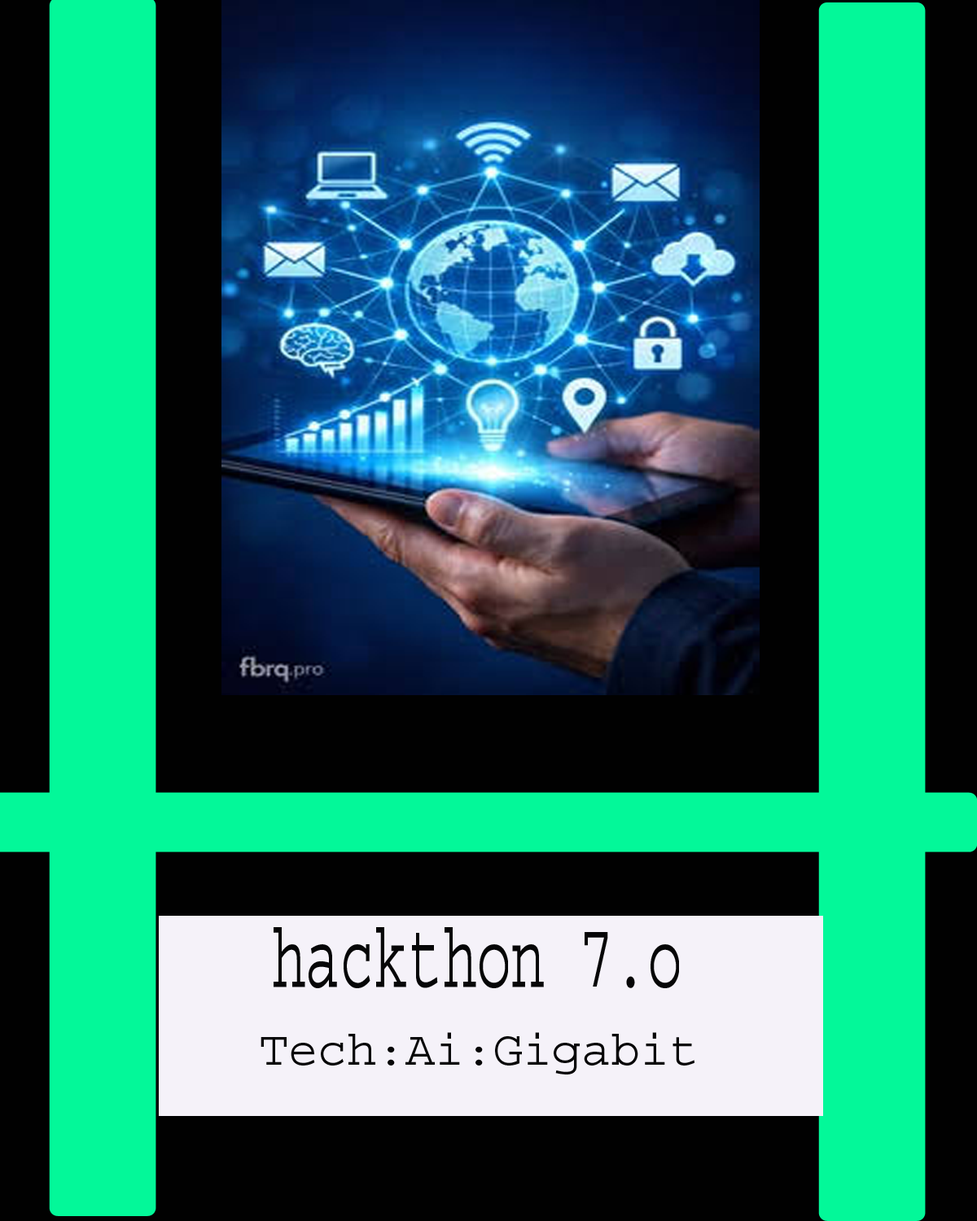
<style>
.page{position:relative;width:977px;height:1221px;background:#010101}
.page>*{position:absolute;margin:0}
.t1{font:95.2px "Courier";color:#060607;scale:0.6 1}
.t2{font:48.8px "Courier";color:#060607}
</style>
<div class="page">
<p class="t1" style="left:273px;top:927px;width:406px;height:61px">hackthon 7.o</p>
<p class="t2" style="left:260px;top:1032px;width:434px;height:42px">Tech:Ai:Gigabit</p>
</div>
